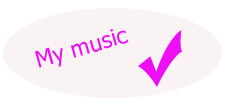
<style>
.page{position:relative;width:225px;height:103px;background:#f9f3f4}
.page>*{position:absolute;margin:0}
.t1{font:22.9px "Tahoma";color:#ee0ef6}
</style>
<div class="page">
<p class="t1" style="left:35px;top:29px;width:94px;height:39px;rotate:-16deg">My music</p>
</div>
